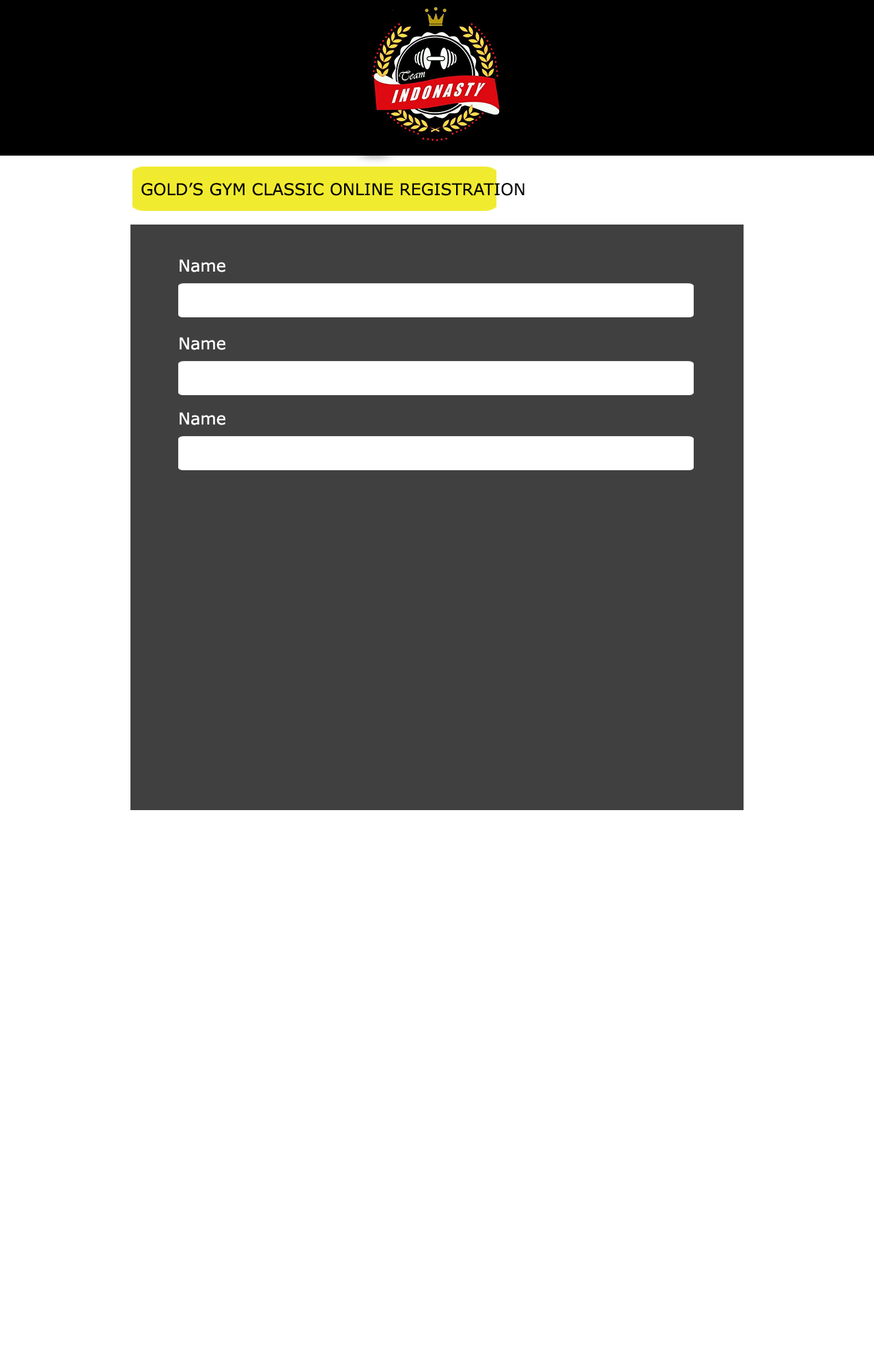
<style>
.page{position:relative;width:874px;height:1365px;background:#ffffff}
.page>*{position:absolute;margin:0}
.t1{font:16.4px "Verdana";color:#000000}
.t2{font:16.4px "Verdana";color:#ffffff}
</style>
<div class="page">
<p class="t1" style="left:141px;top:182px;width:383px;height:14px">GOLD’S GYM CLASSIC ONLINE REGISTRATION</p>
<p class="t2" style="left:179px;top:259px;width:46px;height:13px">Name</p>
<p class="t2" style="left:179px;top:337px;width:46px;height:13px">Name</p>
<p class="t2" style="left:179px;top:412px;width:46px;height:13px">Name</p>
</div>
